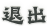
<style>
.page{position:relative;width:47px;height:27px}
.page>*{position:absolute;margin:0}
.t1{font:24.2px "GraveBustedStoneLishuSCRoughlyC";color:#3f4542}
</style>
<div class="page">
<p class="t1" style="left:2px;top:6px;width:44px;height:19px;rotate:-1deg">退出</p>
</div>
